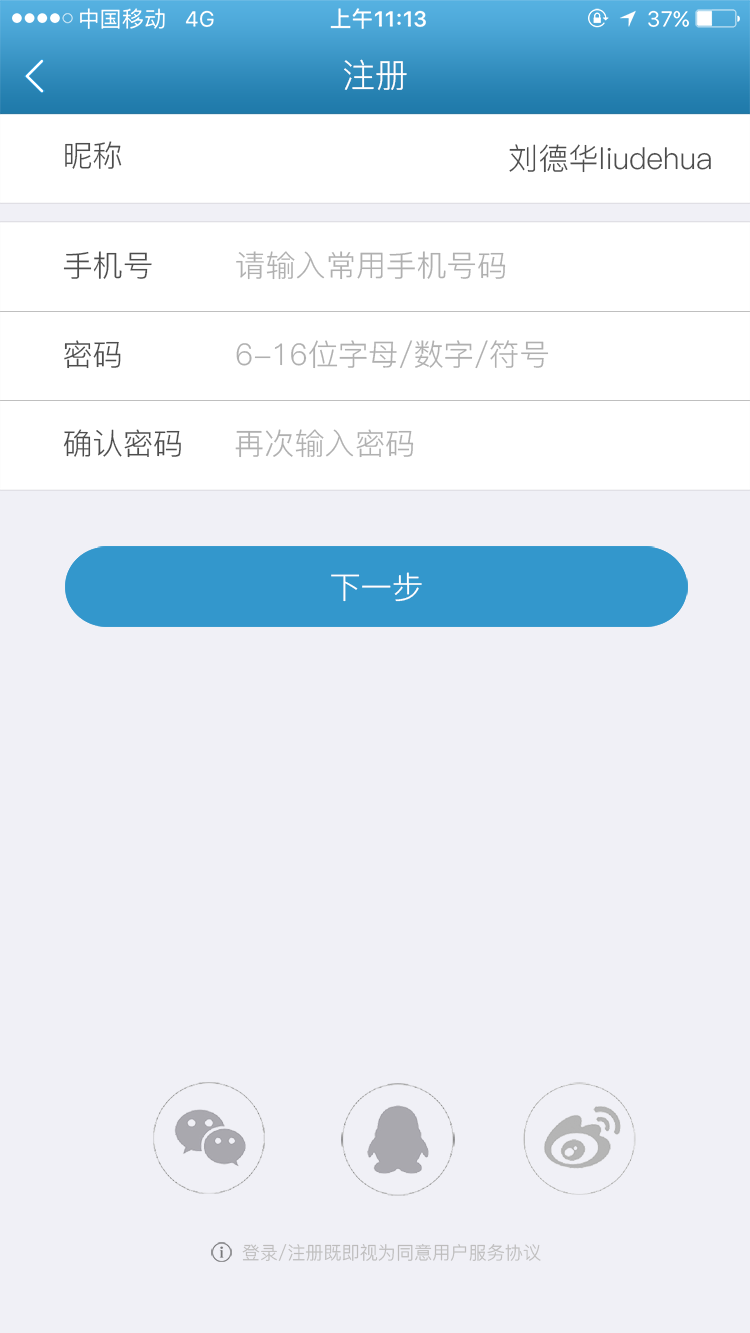
<style>
.page{position:relative;width:750px;height:1333px;background:#f0f0f6}
.page>*{position:absolute;margin:0}
.t1{font:33.3px "PingFang-SC-Regular";color:#ffffff}
.t2{font:30px "PingFang-SC-Regular";color:#4d4d4d}
.t3{font:30px "PingFang-SC-Regular";color:#b0b0b0}
.t4{font:30.9px "PingFang-SC-Regular"}
.t5{font:30.9px "PingFang-SC-Regular";color:#ffffff}
.t6{font:18.1px "PingFang-SC-Regular";color:#bdbcbc}
</style>
<div class="page">
<p class="t1" style="left:344px;top:59px;width:63px;height:32px">注册</p>
<p class="t2" style="left:65px;top:141px;width:57px;height:28px">昵称</p>
<p class="t2" style="left:509px;top:144px;width:202px;height:29px">刘德华liudehua</p>
<p class="t2" style="left:63px;top:251px;width:89px;height:28px">手机号</p>
<p class="t3" style="left:236px;top:251px;width:270px;height:29px">请输入常用手机号码</p>
<p class="t2" style="left:64px;top:340px;width:57px;height:29px">密码</p>
<p class="t3" style="left:236px;top:340px;width:313px;height:29px">6-16位字母/数字/符号</p>
<p class="t2" style="left:63px;top:429px;width:118px;height:29px">确认密码</p>
<p class="t3" style="left:235px;top:429px;width:179px;height:29px">再次输入密码</p>
<p class="t4" style="left:330px;top:573px;width:92px;height:30px">下一步</p>
<p class="t5" style="left:331px;top:572px;width:91px;height:30px">下一步</p>
<p class="t6" style="left:242px;top:1243px;width:299px;height:18px">登录/注册既即视为同意用户服务协议</p>
</div>
